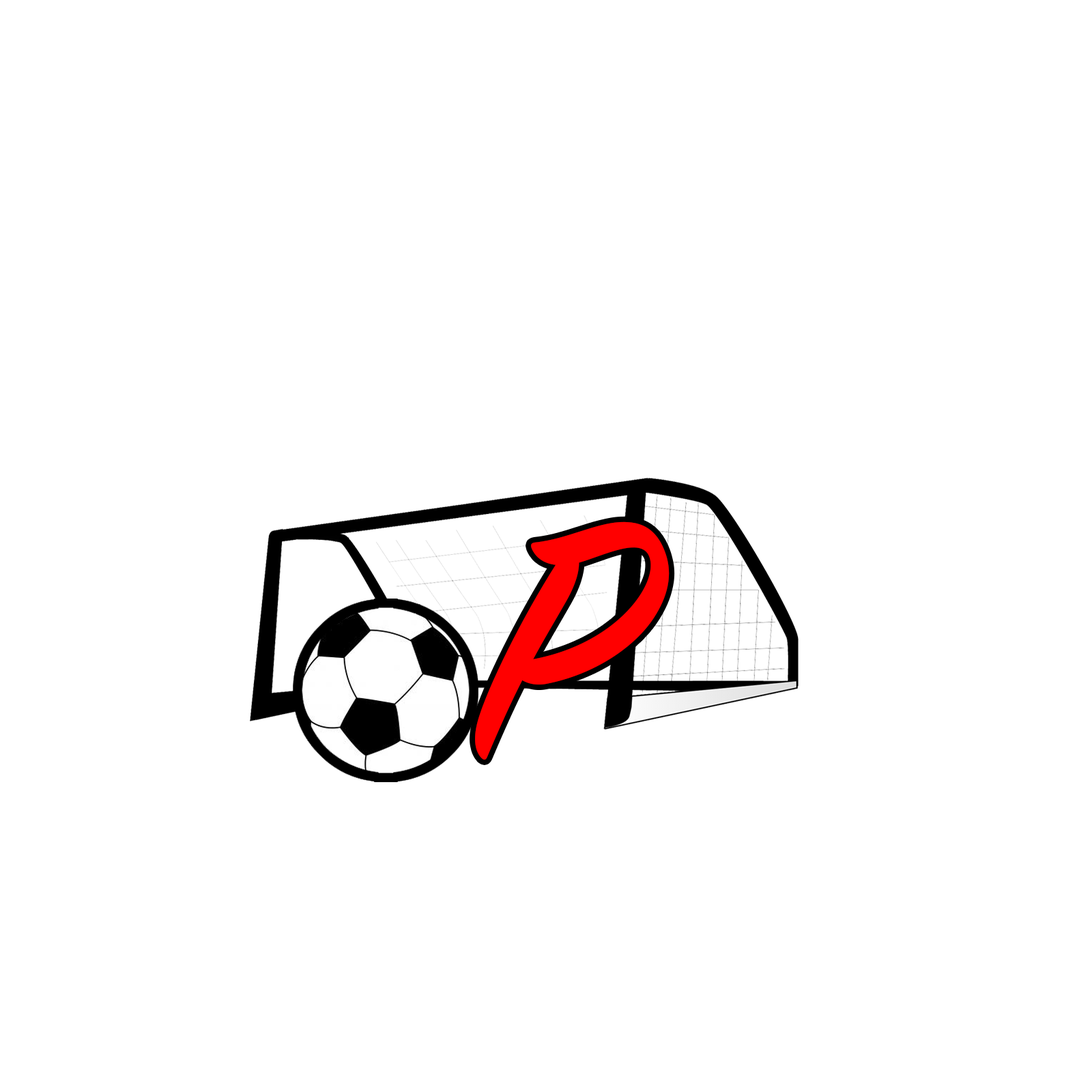
<style>
.page{position:relative;width:1092px;height:1092px;background:#ffffff}
.page>*{position:absolute;margin:0}
.t1{font:375.4px "SignPainter-HouseScript";color:#ff0000}
</style>
<div class="page">
<p class="t1" style="left:475px;top:521px;width:195px;height:239px">P</p>
</div>
